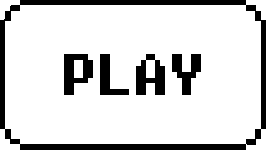
<style>
.page{position:relative;width:266px;height:150px;background:#ffffff}
.page>*{position:absolute;margin:0}
.t1{font:46.3px "Super-Mario-World";letter-spacing:0.02em;color:#000000;text-transform:uppercase;scale:0.83 1}
</style>
<div class="page">
<p class="t1" style="left:64px;top:54px;width:137px;height:41px">Play</p>
</div>
